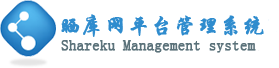
<style>
.page{position:relative;width:279px;height:68px;background:#ffffff}
.page>*{position:absolute;margin:0}
.t1{font:22.3px "STXingkai";color:#2f8cce;font-weight:bold}
.t2{font:14.7px "SimSun";color:#5b727a;font-weight:bold}
</style>
<div class="page">
<p class="t1" style="left:61px;top:14px;width:203px;height:23px">晒库网平台管理系统</p>
<p class="t2" style="left:61px;top:40px;width:195px;height:13px">Shareku Management system</p>
</div>
